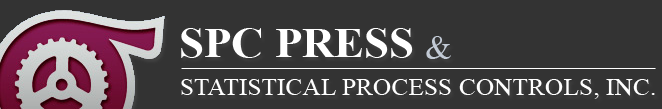
<style>
.page{position:relative;width:662px;height:109px;background:#333333}
.page>*{position:absolute;margin:0}
.t1{font:42.1px "TimesNewRomanPS-BoldMT";color:#ffffff;scale:1.06 1}
.t2{font:56.2px "Times-Roman";color:#c2cad5;scale:1.06 1}
.t3{font:24px "TimesNewRomanPSMT";color:#ffffff;text-transform:uppercase;scale:1.06 1}
</style>
<div class="page">
<p class="t1" style="left:181px;top:28px;width:232px;height:30px">SPC PRESS</p>
<p class="t2" style="left:426px;top:36px;width:25px;height:23px">&amp;</p>
<p class="t3" style="left:181px;top:79px;width:474px;height:20px">Statistical Process Controls, Inc.</p>
</div>
